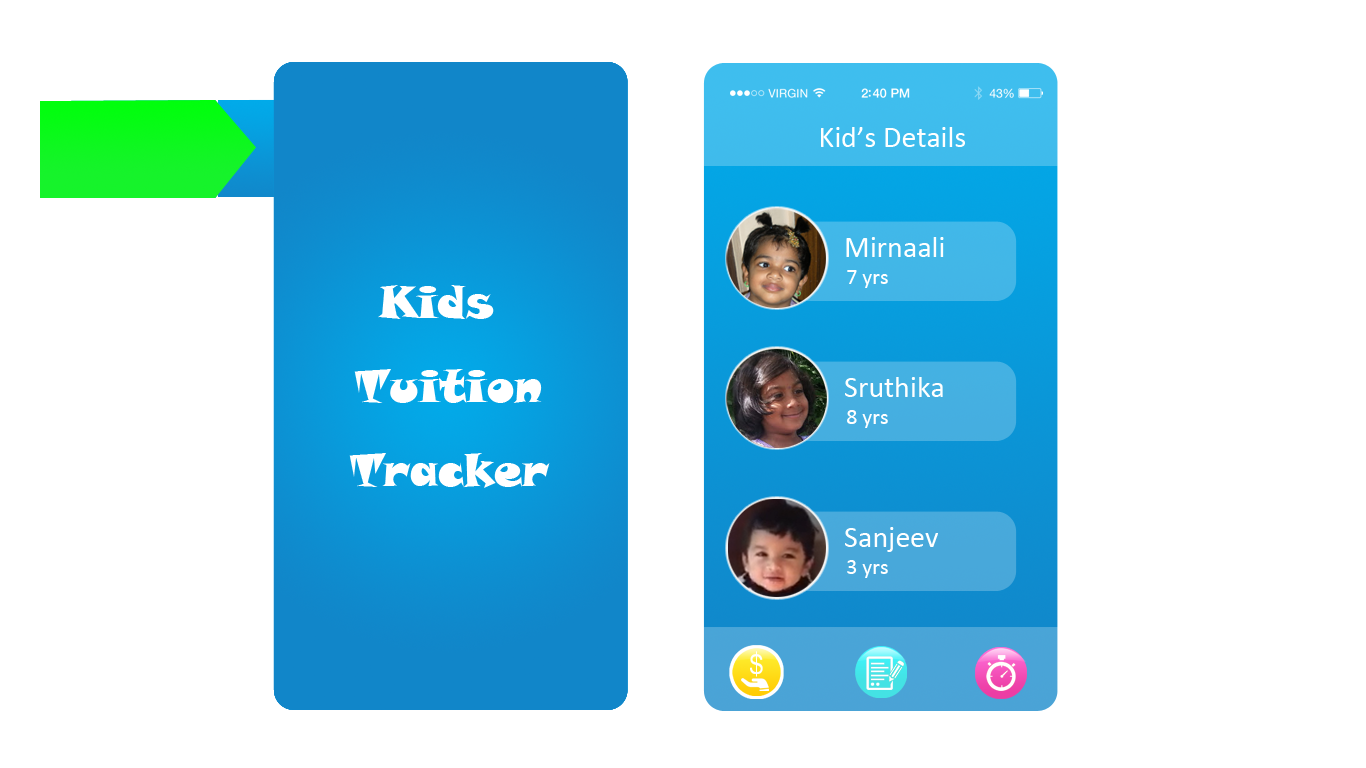
<style>
.page{position:relative;width:1366px;height:768px;background:#ffffff}
.page>*{position:absolute;margin:0}
.t1{font:30px "Calibri";color:#ffffff}
.t2{font:22px "Calibri";color:#ffffff}
.t3{font:45px "SnapITC-Regular";color:#ffffff}
</style>
<div class="page">
<p class="t1" style="left:821px;top:127px;width:144px;height:20px">Kid’s Details</p>
<p class="t1" style="left:846px;top:237px;width:98px;height:20px">Mirnaali</p>
<p class="t2" style="left:847px;top:270px;width:41px;height:18px">7 yrs</p>
<p class="t3" style="left:378px;top:285px;width:116px;height:34px">Kids</p>
<p class="t3" style="left:354px;top:369px;width:188px;height:34px">Tuition</p>
<p class="t1" style="left:845px;top:377px;width:98px;height:20px">Sruthika</p>
<p class="t2" style="left:847px;top:410px;width:41px;height:18px">8 yrs</p>
<p class="t3" style="left:349px;top:453px;width:201px;height:35px">Tracker</p>
<p class="t1" style="left:845px;top:527px;width:93px;height:25px">Sanjeev</p>
<p class="t2" style="left:847px;top:560px;width:41px;height:18px">3 yrs</p>
</div>
